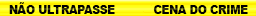
<style>
.page{position:relative;width:256px;height:16px}
.page>*{position:absolute;margin:0}
.t1{font:12px "Arial-Black";color:#000000;text-transform:uppercase;scale:0.88 1}
</style>
<div class="page">
<p class="t1" style="left:9px;top:2px;width:239px;height:12px">NÃO ultrapasse           CENA DO CRIME</p>
</div>
